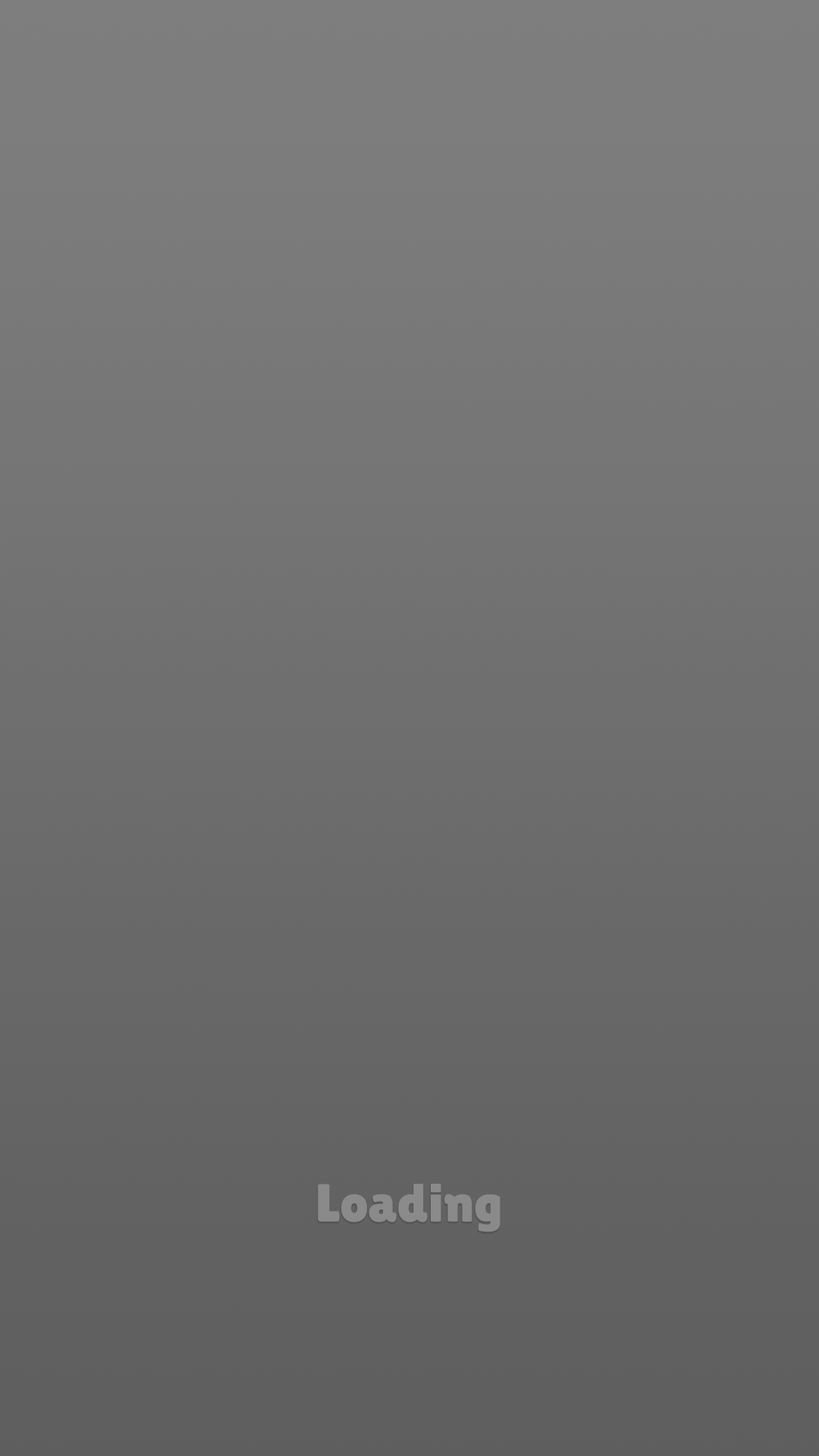
<style>
.page{position:relative;width:819px;height:1456px}
.page>*{position:absolute;margin:0}
.t1{font:53.1px "LilitaOne";color:#8a8a8a;scale:1.04 1}
</style>
<div class="page">
<p class="t1" style="left:318px;top:1184px;width:182px;height:48px">Loading</p>
</div>
